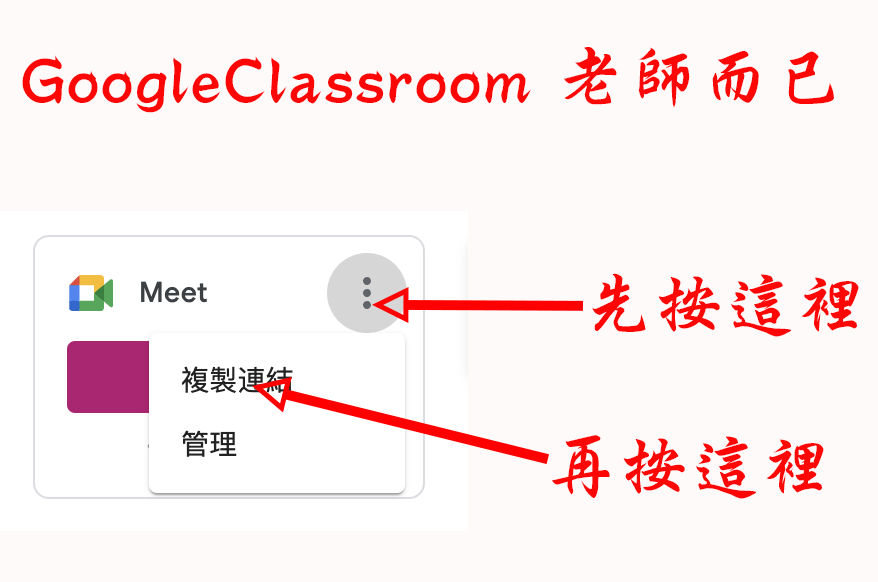
<style>
.page{position:relative;width:878px;height:582px;background:#fffafa}
.page>*{position:absolute;margin:0}
.t1{font:72px "DFXingKaiStd-W5";color:#fc0606}
</style>
<div class="page">
<p class="t1" style="left:22px;top:47px;width:812px;height:66px">GoogleClassroom 老師而已</p>
<p class="t1" style="left:592px;top:273px;width:267px;height:64px">先按這裡</p>
<p class="t1" style="left:552px;top:435px;width:272px;height:64px">再按這裡</p>
</div>
